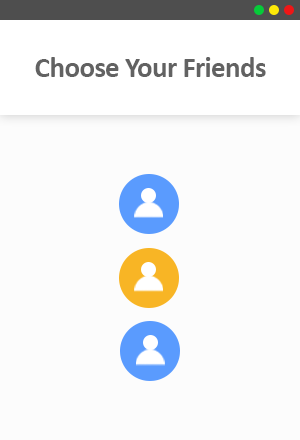
<style>
.page{position:relative;width:300px;height:440px;background:#fcfcfc}
.page>*{position:absolute;margin:0}
.t1{font:29.2px "Calibri-Bold";letter-spacing:-0.025em;color:#626262}
</style>
<div class="page">
<p class="t1" style="left:35px;top:57px;width:231px;height:20px">Choose Your Friends</p>
</div>
